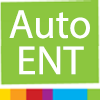
<style>
.page{position:relative;width:100px;height:100px;background:#8cc63f}
.page>*{position:absolute;margin:0}
.t1{font:40.8px/36.3px "MyriadPro-Regular";color:#ffffff}
</style>
<div class="page">
<p class="t1" style="left:9px;top:10px;width:81px;height:65px;text-align:center">Auto<br>ENT</p>
</div>
